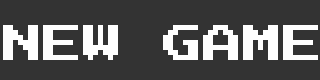
<style>
.page{position:relative;width:320px;height:80px;background:#333333}
.page>*{position:absolute;margin:0}
.t1{font:40px "PressStart2P-Regular";color:#ffffff}
</style>
<div class="page">
<p class="t1" style="left:3px;top:25px;width:315px;height:35px">NEW GAME</p>
</div>
